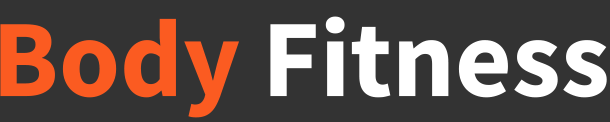
<style>
.page{position:relative;width:610px;height:122px;background:#333333}
.page>*{position:absolute;margin:0}
.t1{font:110px "SourceSansPro-Bold";color:#ffffff}
.t2{font:110px "SourceSansPro-Bold";color:#fb5b21}
</style>
<div class="page">
<p class="t1" style="left:0px;top:16px;width:607px;height:102px"><span class="t2">Body </span>Fitness</p>
</div>
